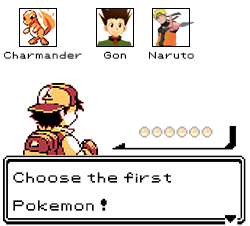
<style>
.page{position:relative;width:250px;height:226px;background:#ffffff}
.page>*{position:absolute;margin:0}
.t1{font:7.9px "Pokemon-Classic";color:#000000}
.t2{font:11.7px "Pokemon-Classic";color:#000000}
</style>
<div class="page">
<p class="t1" style="left:4px;top:51px;width:78px;height:8px">Charmander</p>
<p class="t1" style="left:104px;top:51px;width:22px;height:8px">Gon</p>
<p class="t1" style="left:149px;top:51px;width:45px;height:8px">Naruto</p>
<p class="t2" style="left:13px;top:172px;width:158px;height:39px">Choose the first <br><br>Pokemon !</p>
</div>
